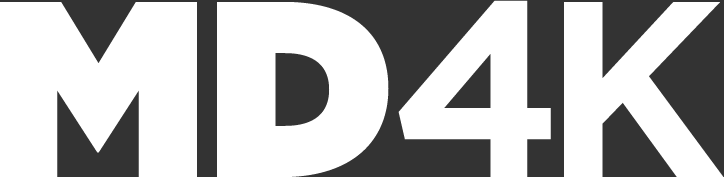
<style>
.page{position:relative;width:724px;height:177px;background:#ffffff}
.page>*{position:absolute;margin:0}
.t1{font:250px "Gotham-Ultra";color:#ffffff}
.t2{font:250px "GothamBold";letter-spacing:-0.08em;color:#ffffff}
</style>
<div class="page">
<p class="t1" style="left:0px;top:2px;width:389px;height:175px">MD</p>
<p class="t2" style="left:398px;top:0px;width:326px;height:177px">4K</p>
</div>
